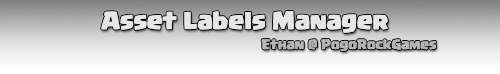
<style>
.page{position:relative;width:500px;height:74px}
.page>*{position:absolute;margin:0}
.t1{font:18px "CCBackBeat";color:#e6e6e6}
.t2{font:10px "CCBackBeat";color:#b5b5b5}
</style>
<div class="page">
<p class="t1" style="left:101px;top:11px;width:287px;height:22px">Asset Labels Manager</p>
<p class="t2" style="left:261px;top:39px;width:176px;height:13px">Ethan @ PogoRockGames</p>
</div>
